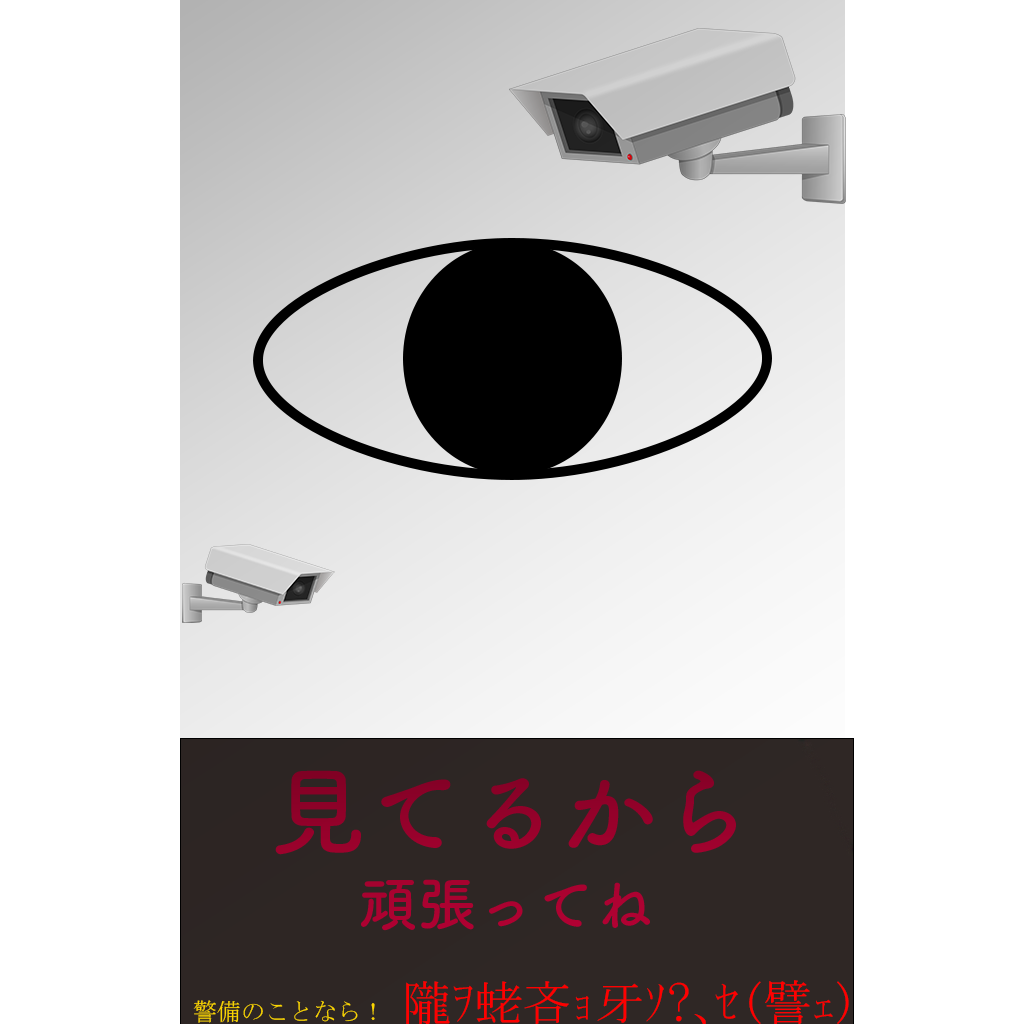
<style>
.page{position:relative;width:1024px;height:1024px;background:#ffffff}
.page>*{position:absolute;margin:0}
.t1{font:96.4px "TsukuBRdGothicStd-B";color:#92012a}
.t2{font:59.1px "TsukuBRdGothicStd-B";color:#b60033}
.t3{font:48px "MS-Mincho";color:#ff0000}
.t4{font:24px "MS-Mincho";color:#ffd900}
</style>
<div class="page">
<p class="t1" style="left:275px;top:770px;width:461px;height:85px">見てるから</p>
<p class="t2" style="left:361px;top:879px;width:289px;height:52px">頑張ってね</p>
<p class="t3" style="left:193px;top:980px;width:656px;height:45px"><span class="t4">警備のことなら！ </span>隴ｦ蛯吝ｮ牙ｿ?､ｾ(譬ｪ)</p>
</div>
